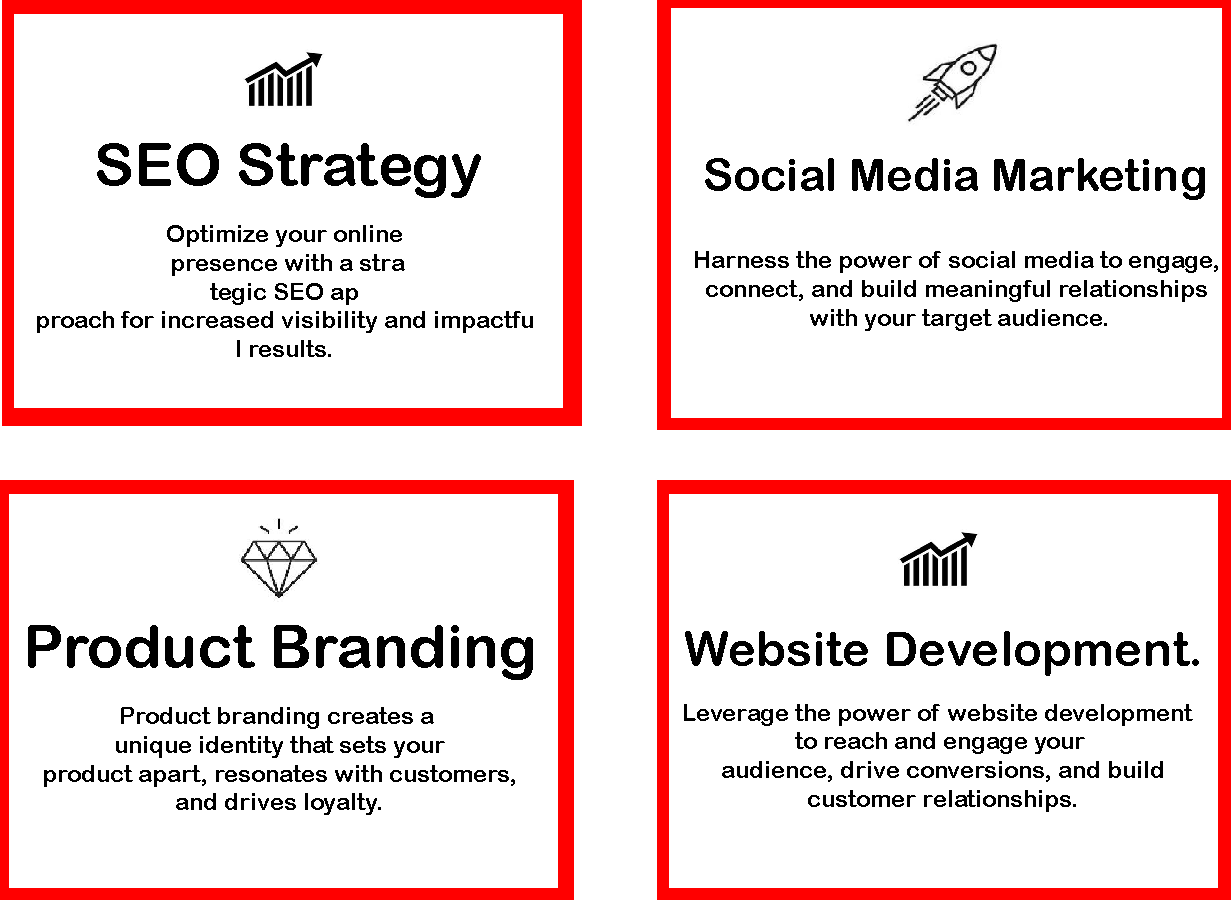
<style>
.page{position:relative;width:1231px;height:900px;background:#ffffff}
.page>*{position:absolute;margin:0}
.t1{font:60px "ArialRoundedMTBold";color:#000000}
.t2{font:45.4px "ArialRoundedMTBold";color:#000000}
.t3{font:24px "ArialRoundedMTBold";color:#000000}
.t4{font:48px "ArialRoundedMTBold";color:#000000}
</style>
<div class="page">
<p class="t1" style="left:97px;top:143px;width:384px;height:55px">SEO Strategy</p>
<p class="t2" style="left:705px;top:158px;width:500px;height:42px">Social Media Marketing</p>
<p class="t3" style="left:37px;top:225px;width:496px;height:132px;text-align:center">Optimize your online<br> presence with a stra<br>tegic SEO ap<br>proach for increased visibility and impactfu<br>l results.</p>
<p class="t3" style="left:695px;top:251px;width:523px;height:80px;text-align:center">Harness the power of social media to engage, <br>connect, and build meaningful relationships <br>with your target audience.</p>
<p class="t1" style="left:28px;top:625px;width:505px;height:55px">Product Branding</p>
<p class="t4" style="left:685px;top:631px;width:514px;height:45px">Website Development.</p>
<p class="t3" style="left:44px;top:707px;width:471px;height:108px;text-align:center">Product branding creates a<br> unique identity that sets your<br> product apart, resonates with customers,<br> and drives loyalty.</p>
<p class="t3" style="left:684px;top:704px;width:509px;height:108px;text-align:center">Leverage the power of website development <br>to reach and engage your<br> audience, drive conversions, and build<br> customer relationships.</p>
</div>
